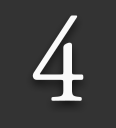
<style>
.page{position:relative;width:116px;height:128px;background:#333333}
.page>*{position:absolute;margin:0}
.t1{font:102px "KoPubWorldBatangMedium";color:#fafafa}
</style>
<div class="page">
<p class="t1" style="left:32px;top:15px;width:52px;height:86px">4</p>
</div>
